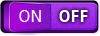
<style>
.page{position:relative;width:100px;height:36px}
.page>*{position:absolute;margin:0}
.t1{font:16px "DroidSans";color:#ffffff}
.t2{font:16px "DroidSans-Bold";color:#ffffff}
</style>
<div class="page">
<p class="t1" style="left:19px;top:10px;width:22px;height:12px">ON</p>
<p class="t2" style="left:59px;top:10px;width:29px;height:12px">OFF</p>
</div>
